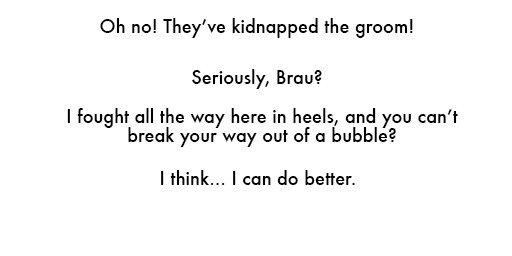
<style>
.page{position:relative;width:512px;height:256px;background:#ffffff}
.page>*{position:absolute;margin:0}
.t1{font:18px "Futura-Medium";color:#000000}
.t2{font:18px/19px "Futura-Medium";color:#000000}
</style>
<div class="page">
<p class="t1" style="left:100px;top:18px;width:313px;height:20px">Oh no! They’ve kidnapped the groom!</p>
<p class="t1" style="left:192px;top:69px;width:130px;height:20px">Seriously, Brau?</p>
<p class="t2" style="left:67px;top:108px;width:391px;height:39px;text-align:center">I fought all the way here in heels, and you can’t<br>break your way out of a bubble?</p>
<p class="t1" style="left:161px;top:170px;width:194px;height:15px">I think... I can do better.</p>
</div>
